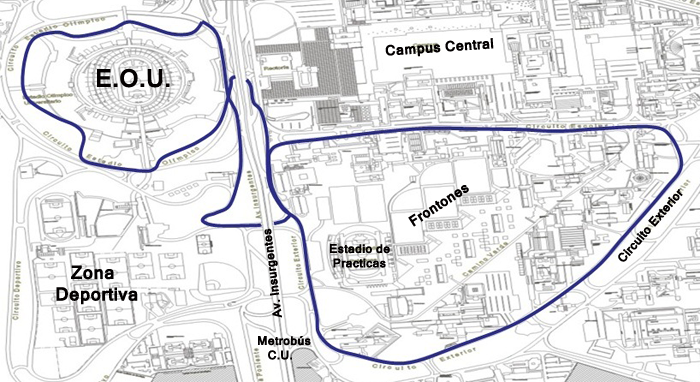
<style>
.page{position:relative;width:700px;height:382px;background:#ffffff}
.page>*{position:absolute;margin:0}
.t1{font:14px "Kartika-Bold";color:#030000}
.t2{font:24px "Kartika-Bold";color:#030000}
.t3{font:12px "Kartika-Bold";color:#030000}
.t4{font:18px "Kartika-Bold";color:#030000}
</style>
<div class="page">
<p class="t1" style="left:385px;top:38px;width:109px;height:19px;rotate:-4deg">Campus Central</p>
<p class="t2" style="left:97px;top:68px;width:73px;height:20px">E.O.U.</p>
<p class="t1" style="left:408px;top:185px;width:61px;height:42px;rotate:-33deg">Frontones</p>
<p class="t3" style="left:618px;top:189px;width:65px;height:73px;rotate:-49deg">Circuito Exterior</p>
<p class="t3" style="left:264px;top:228px;width:18px;height:90px;rotate:-97deg">Av. Insurgentes</p>
<p class="t3" style="left:330px;top:244px;width:60px;height:24px">Estadio de<br> Practicas</p>
<p class="t4" style="left:56px;top:265px;width:82px;height:40px">Zona <br>Deportiva</p>
<p class="t3" style="left:258px;top:336px;width:53px;height:24px">Metrobús<br>   C.U.</p>
</div>
